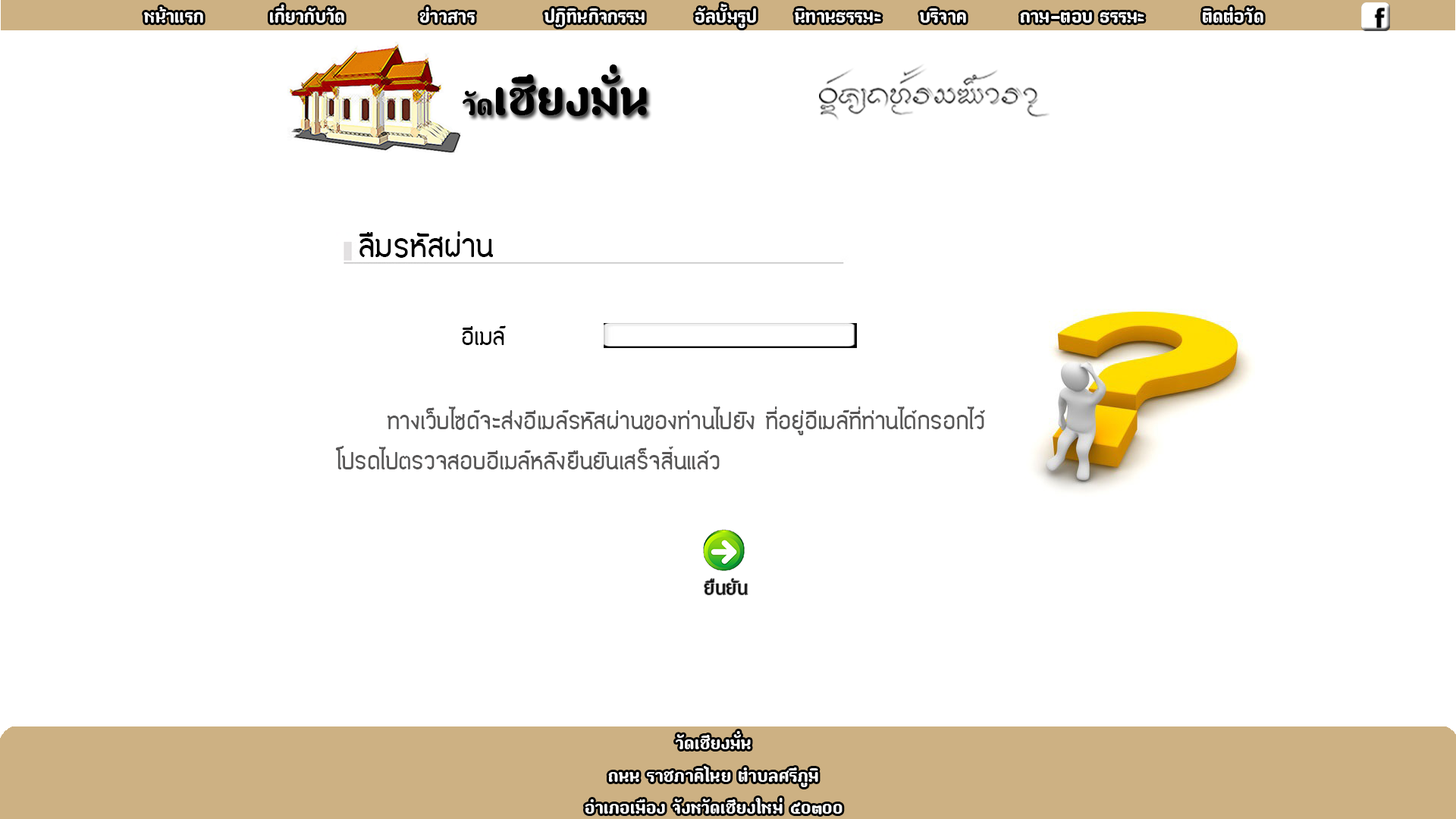
<style>
.page{position:relative;width:1456px;height:819px;background:#ffffff}
.page>*{position:absolute;margin:0}
.t1{font:27.3px "paaymaay";color:#f9f9f9}
.t2{font:73.6px "paaymaay";color:#000000}
.t3{font:44.2px "paaymaay";color:#000000}
.t4{font:36.4px "EDPenSook-NormalToneBold";color:#020202}
.t5{font:27.3px "EDPenSook-NormalToneBold";color:#020202}
.t6{font:27.3px "EDPenSook-NormalToneBold";color:#585757}
.t7{font:27.3px "PGVIM";color:#020202}
.t8{font:26.9px "paaymaay";color:#fdfdfc}
</style>
<div class="page">
<p class="t1" style="left:144px;top:4px;width:1119px;height:24px">หน้าแรก    เกี่ยวกับวัด    ข่าวสาร    ปฏิทินกิจกรรม   อัลบั้มรูป  นิทานธรรมะ  บริจาค   ถาม-ตอบ ธรรมะ    ติดต่อวัด</p>
<p class="t2" style="left:463px;top:64px;width:184px;height:52px"><span class="t3">วัด</span>เชียงมั่น</p>
<p class="t4" style="left:359px;top:231px;width:134px;height:27px">ลืมรหัสผ่าน</p>
<p class="t5" style="left:462px;top:325px;width:44px;height:20px">อีเมล์</p>
<p class="t6" style="left:388px;top:406px;width:597px;height:29px">ทางเว็บไซด์จะส่งอีเมล์รหัสผ่านของท่านไปยัง ที่อยู่อีเมล์ที่ท่านได้กรอกไว้</p>
<p class="t6" style="left:335px;top:445px;width:385px;height:24px">โปรดไปตรวจสอบอีเมล์หลังยืนยันเสร็จสิ้นแล้ว</p>
<p class="t7" style="left:704px;top:579px;width:44px;height:16px">ยืนยัน</p>
<p class="t8" style="left:585px;top:731px;width:257px;height:83px;text-align:center">วัดเชียงมั่น<br>ถนน ราชภาคิไนย ตำบลศรีภูมิ<br>อำเภอเมือง จังหวัดเชียงใหม่ ๕o๓oo</p>
</div>
